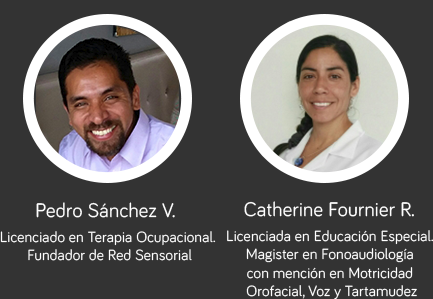
<style>
.page{position:relative;width:433px;height:299px;background:#333333}
.page>*{position:absolute;margin:0}
.t1{font:20.4px "Bariol-Regular";letter-spacing:0.01em;color:#ffffff}
.t2{font:15.3px "Bariol-Regular";letter-spacing:0.01em;color:#ffffff}
</style>
<div class="page">
<p class="t1" style="left:36px;top:202px;width:139px;height:16px">Pedro Sánchez V.</p>
<p class="t1" style="left:244px;top:201px;width:170px;height:16px">Catherine Fournier R.</p>
<p class="t2" style="left:0px;top:231px;width:216px;height:30px;text-align:center">Licenciado en Terapia Ocupacional. <br>Fundador de Red Sensorial</p>
<p class="t2" style="left:227px;top:230px;width:207px;height:70px;text-align:center">Licenciada en Educación Especial. <br>Magister en Fonoaudiología <br>con mención en Motricidad <br>Orofacial, Voz y Tartamudez</p>
</div>
